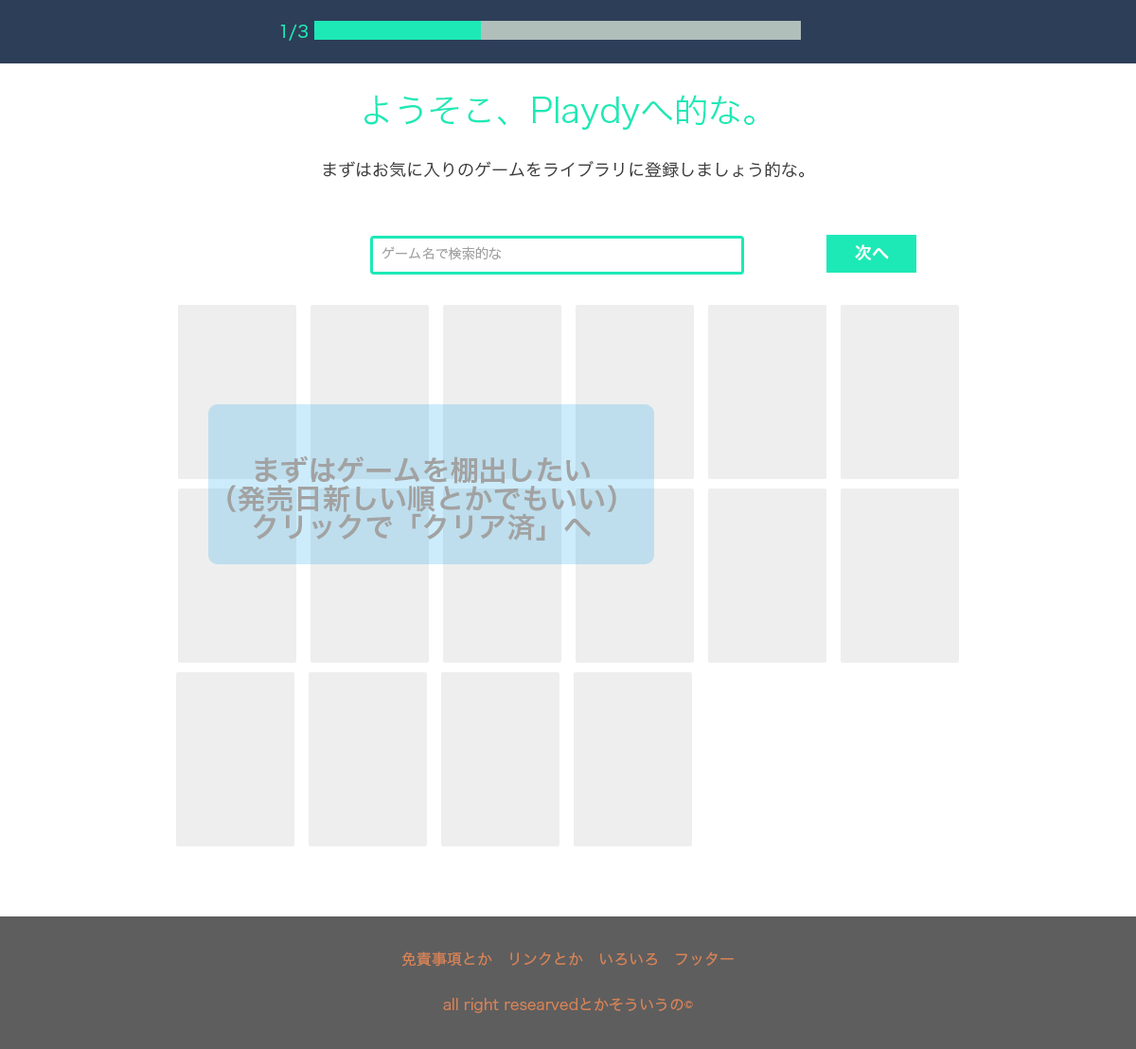
<style>
.page{position:relative;width:1136px;height:1049px;background:#ffffff}
.page>*{position:absolute;margin:0}
.t1{font:17px "HiraKakuPro-W3";color:#1de9b6}
.t2{font:34.1px "HiraKakuPro-W3";color:#1de9b6}
.t3{font:17px "HiraKakuPro-W3";color:#3d3d3d}
.t4{font:17px "HiraKakuPro-W6";color:#ffffff}
.t5{font:13.3px "HiraKakuPro-W3";color:#a2a2a2}
.t6{font:28.4px/28.4px "HiraKakuPro-W6";color:#a2a2a2}
.t7{font:15.2px/45.5px "HiraKakuPro-W3";color:#d68356}
</style>
<div class="page">
<p class="t1" style="left:280px;top:25px;width:28px;height:16px">1/3</p>
<p class="t2" style="left:365px;top:95px;width:390px;height:35px">ようそこ、Playdyへ的な。</p>
<p class="t3" style="left:323px;top:161px;width:482px;height:17px">まずはお気に入りのゲームをライブラリに登録しましょう的な。</p>
<p class="t4" style="left:855px;top:244px;width:34px;height:16px">次へ</p>
<p class="t5" style="left:382px;top:246px;width:119px;height:14px">ゲーム名で検索的な</p>
<p class="t6" style="left:227px;top:456px;width:390px;height:85px;text-align:center">まずはゲームを棚出したい<br>（発売日新しい順とかでもいい）<br>クリックで「クリア済」へ</p>
<p class="t7" style="left:402px;top:952px;width:332px;height:61px;text-align:center">免責事項とか　リンクとか　いろいろ　フッター<br>all right researvedとかそういうの©</p>
</div>
